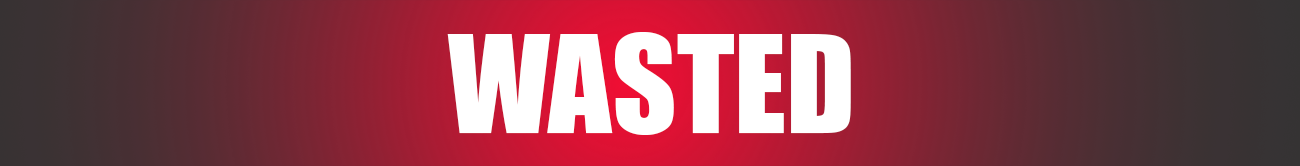
<style>
.page{position:relative;width:1300px;height:166px}
.page>*{position:absolute;margin:0}
.t1{font:125px "Impact";color:#ffffff}
</style>
<div class="page">
<p class="t1" style="left:447px;top:32px;width:404px;height:103px">WASTED</p>
</div>
